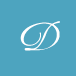
<style>
.page{position:relative;width:76px;height:76px;background:#4da4bf}
.page>*{position:absolute;margin:0}
.t1{font:41.5px "HenryMorganHand";color:#ffffff;scale:1.14 1}
</style>
<div class="page">
<p class="t1" style="left:20px;top:21px;width:40px;height:30px">D</p>
</div>
